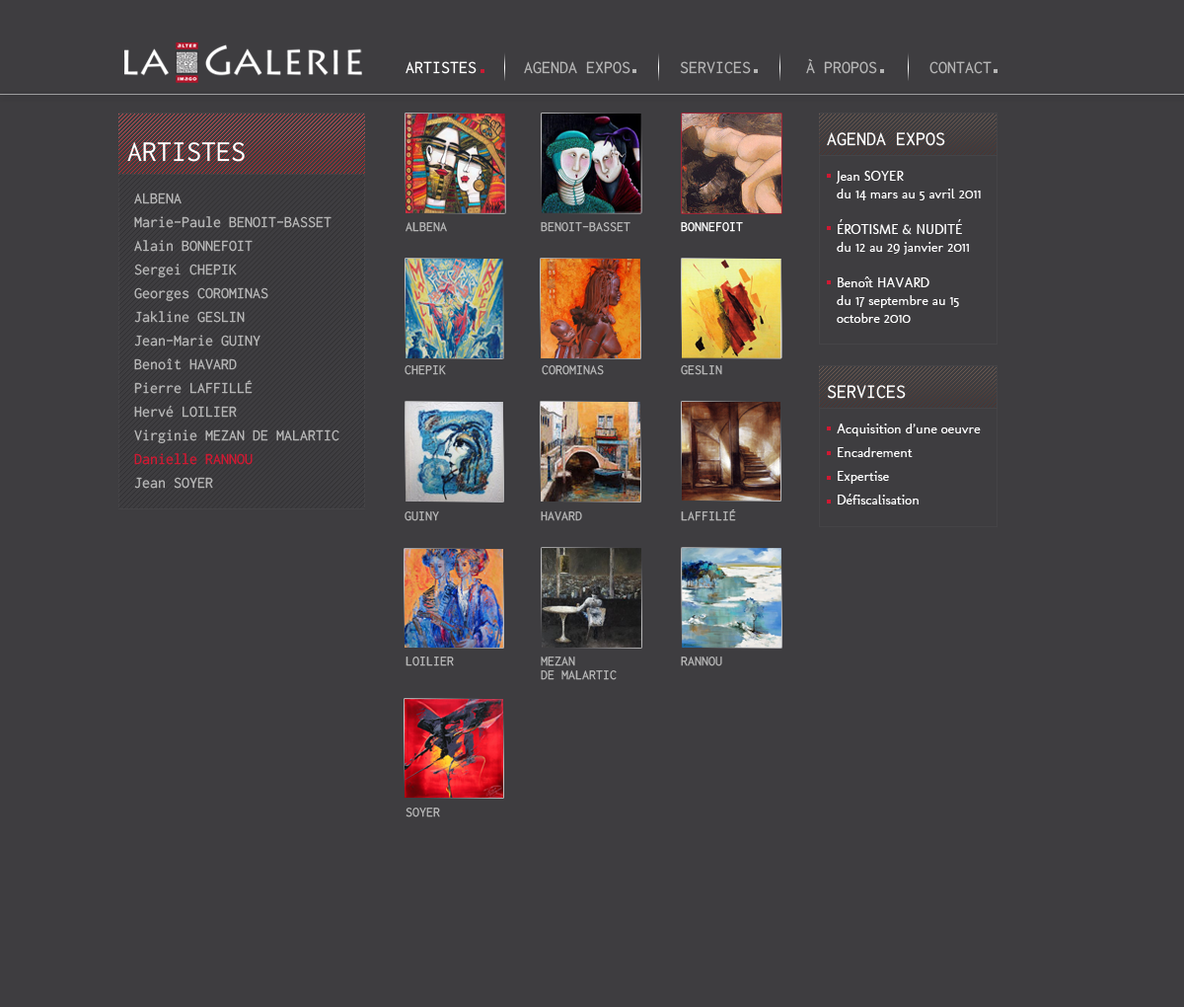
<style>
.page{position:relative;width:1184px;height:1007px;background:#3e3d40}
.page>*{position:absolute;margin:0}
.t1{font:17.8px "Inconsolata";color:#ffffff}
.t2{font:17.8px "Inconsolata";color:#b5b5b5}
.t3{font:19.7px "Inconsolata";color:#ffffff}
.t4{font:29.6px "Inconsolata";color:#ffffff}
.t5{font:13.8px/17.8px "Molengo";color:#ffffff}
.t6{font:15.8px/23.7px "Inconsolata";color:#b5b5b5}
.t7{font:15.8px/23.7px "Inconsolata";color:#ce1932}
.t8{font:13.8px "Inconsolata";color:#b5b5b5}
.t9{font:13.8px "Inconsolata";color:#ffffff}
.t10{font:13.8px/23.7px "Molengo";color:#ffffff}
.t11{font:13.8px/13.8px "Inconsolata";color:#b5b5b5}
</style>
<div class="page">
<p class="t1" style="left:406px;top:61px;width:71px;height:13px">ARTISTES</p>
<p class="t2" style="left:524px;top:61px;width:107px;height:13px">AGENDA EXPOS</p>
<p class="t2" style="left:680px;top:61px;width:71px;height:13px">SERVICES</p>
<p class="t2" style="left:806px;top:58px;width:71px;height:16px">À PROPOS</p>
<p class="t2" style="left:930px;top:61px;width:62px;height:13px">CONTACT</p>
<p class="t3" style="left:827px;top:132px;width:119px;height:14px">AGENDA EXPOS</p>
<p class="t4" style="left:127px;top:142px;width:118px;height:20px">ARTISTES</p>
<p class="t5" style="left:836px;top:171px;width:145px;height:152px">Jean SOYER<br>du 14 mars au 5 avril 2011<br><br>ÉROTISME &amp; NUDITÉ<br>du 12 au 29 janvier 2011<br><br>Benoît HAVARD<br>du 17 septembre au 15 octobre 2010</p>
<p class="t6" style="left:134px;top:192px;width:206px;height:297px">ALBENA<br>Marie-Paule BENOIT-BASSET<br>Alain BONNEFOIT<br>Sergei CHEPIK<br>Georges COROMINAS<br>Jakline GESLIN<br>Jean-Marie GUINY<br>Benoît HAVARD<br>Pierre LAFFILLÉ<br>Hervé LOILIER<br>Virginie MEZAN DE MALARTIC<br><span class="t7">Danielle RANNOU<br></span>Jean SOYER</p>
<p class="t8" style="left:406px;top:222px;width:41px;height:10px">ALBENA</p>
<p class="t8" style="left:541px;top:222px;width:90px;height:10px">BENOIT-BASSET</p>
<p class="t9" style="left:681px;top:222px;width:62px;height:10px">BONNEFOIT</p>
<p class="t8" style="left:405px;top:365px;width:41px;height:10px">CHEPIK</p>
<p class="t8" style="left:542px;top:365px;width:62px;height:10px">COROMINAS</p>
<p class="t8" style="left:681px;top:365px;width:41px;height:10px">GESLIN</p>
<p class="t3" style="left:828px;top:385px;width:78px;height:14px">SERVICES</p>
<p class="t10" style="left:837px;top:423px;width:144px;height:81px">Acquisition d’une oeuvre<br>Encadrement<br>Expertise<br>Défiscalisation</p>
<p class="t8" style="left:681px;top:508px;width:55px;height:13px">LAFFILIÉ</p>
<p class="t8" style="left:405px;top:511px;width:34px;height:10px">GUINY</p>
<p class="t8" style="left:541px;top:511px;width:41px;height:10px">HAVARD</p>
<p class="t8" style="left:406px;top:656px;width:48px;height:10px">LOILIER</p>
<p class="t11" style="left:541px;top:656px;width:76px;height:24px">MEZAN<br>DE MALARTIC</p>
<p class="t8" style="left:681px;top:656px;width:41px;height:10px">RANNOU</p>
<p class="t8" style="left:406px;top:807px;width:34px;height:10px">SOYER</p>
</div>
